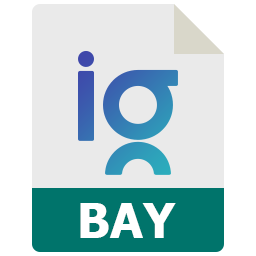
<style>
.page{position:relative;width:256px;height:256px;background:#eaeaea}
.page>*{position:absolute;margin:0}
.t1{font:48px "Tahoma-Bold";color:#ffffff}
</style>
<div class="page">
<p class="t1" style="left:80px;top:203px;width:96px;height:35px">BAY</p>
</div>
